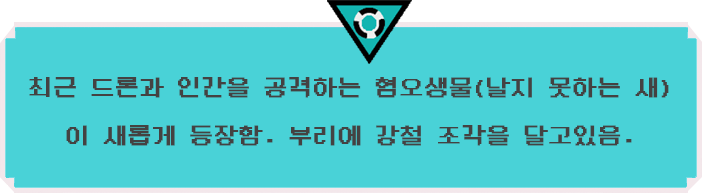
<style>
.page{position:relative;width:703px;height:193px;background:#49d2d7}
.page>*{position:absolute;margin:0}
.t1{font:24px/48px "DungGeunMo";color:#444242;font-weight:bold}
</style>
<div class="page">
<p class="t1" style="left:29px;top:77px;width:640px;height:69px;text-align:center">최근 드론과 인간을 공격하는 혐오생물(날지 못하는 새)<br>이 새롭게 등장함. 부리에 강철 조각을 달고있음.</p>
</div>
